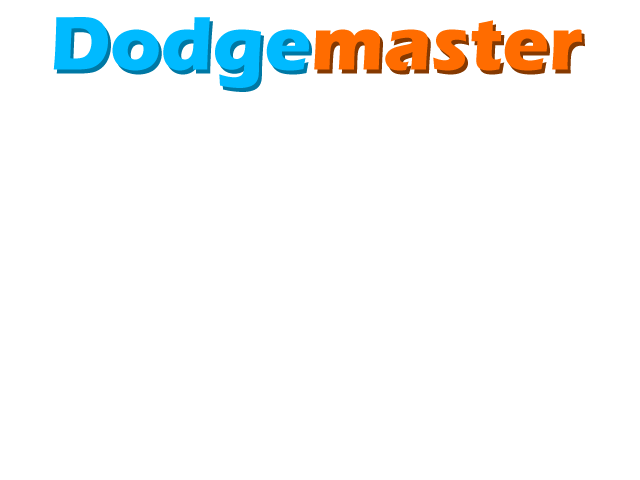
<style>
.page{position:relative;width:640px;height:480px;background:#ffffff}
.page>*{position:absolute;margin:0}
.t1{font:78.4px "ErasITC-Bold";color:#00baff}
.t2{font:78.4px "ErasITC-Bold";color:#ff6c00}
</style>
<div class="page">
<p class="t1" style="left:53px;top:17px;width:256px;height:71px">Dodge</p>
<p class="t2" style="left:314px;top:20px;width:268px;height:51px">master</p>
</div>
